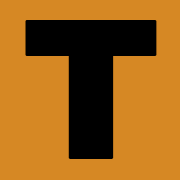
<style>
.page{position:relative;width:180px;height:180px;background:#d68824}
.page>*{position:absolute;margin:0}
.t1{font:191.7px "Arial-Black";color:#000000;font-weight:bold}
</style>
<div class="page">
<p class="t1" style="left:25px;top:20px;width:132px;height:139px">T</p>
</div>
